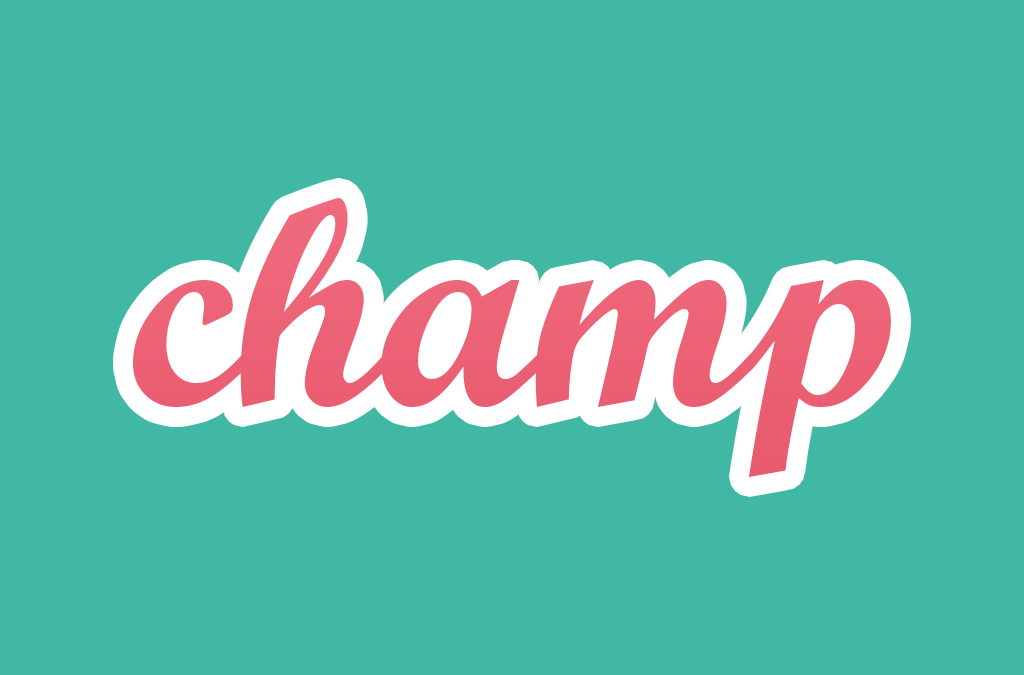
<style>
.page{position:relative;width:1024px;height:675px;background:#40b8a3}
.page>*{position:absolute;margin:0}
.t1{font:295px "ScriptMTBold";color:#ec6275}
</style>
<div class="page">
<p class="t1" style="left:133px;top:198px;width:758px;height:279px">champ</p>
</div>
